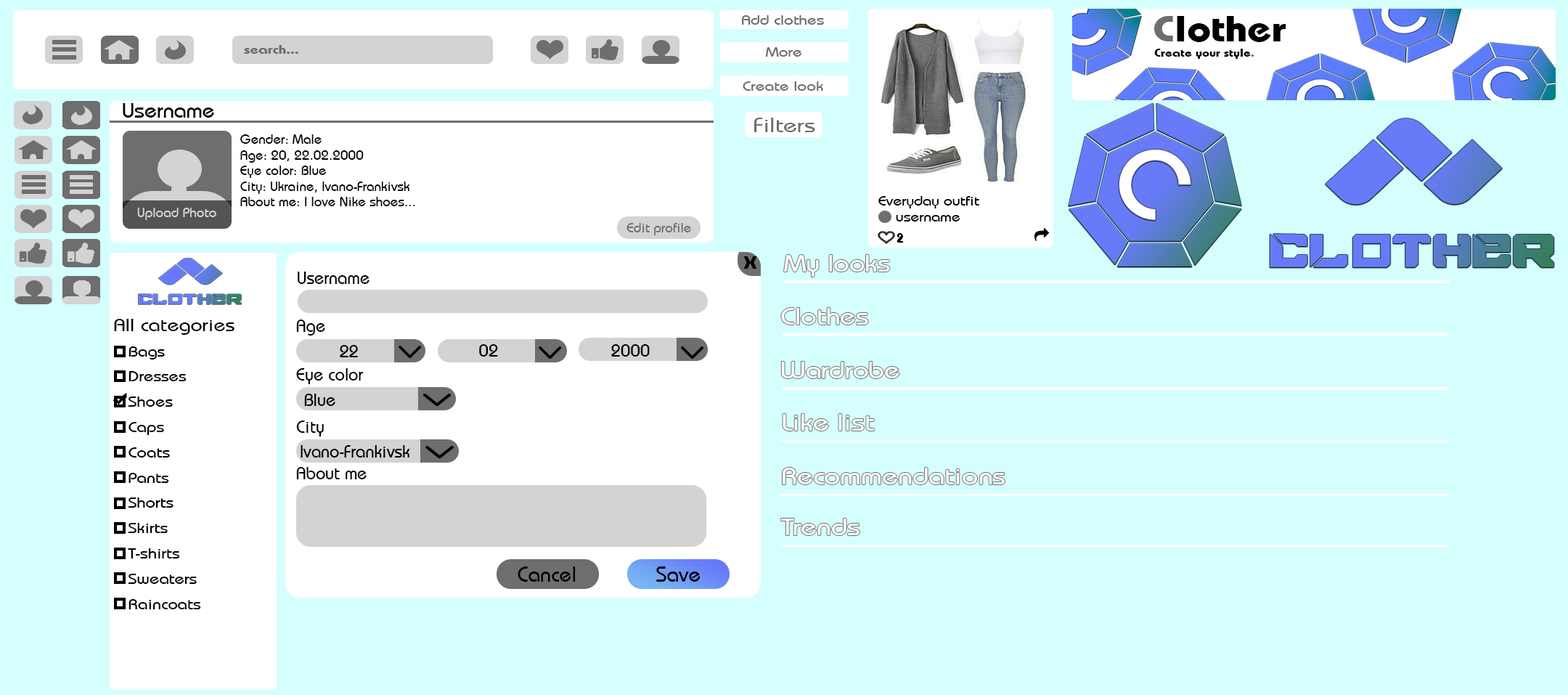
<style>
.page{position:relative;width:1568px;height:695px;background:#d5fffd}
.page>*{position:absolute;margin:0}
.t1{font:13.9px "BauhausLT-Medium";color:#6e6e6e;scale:1.2 1}
.t2{font:36.3px "BauhausLT-Bold";color:#000000;scale:1.2 1}
.t3{font:36.3px "BauhausLT-Bold";color:#6e6e6e;scale:1.2 1}
.t4{font:12.2px "BauhausLT-Bold";color:#6e6e6e;scale:1.24 1}
.t5{font:10.9px "BauhausLT-Bold";color:#000000;scale:1.2 1}
.t6{font:10.9px "BauhausLT-Bold";color:#6e6e6e;scale:1.2 1}
.t7{font:20.9px "BauhausLT-Medium";color:#000000;scale:1.06 1}
.t8{font:20.6px "BauhausLT-Medium";color:#6e6e6e;scale:1.2 1}
.t9{font:13.1px "BauhausLT-Medium";color:#000000;scale:1.06 1}
.t10{font:13.1px "BauhausLT-Medium";color:#000000;scale:1.2 1}
.t11{font:13.1px "BauhausLT-Medium";color:#d3d3d4;scale:1.06 1}
.t12{font:13.1px "BauhausLT-Bold";color:#000000;scale:1.2 1}
.t13{font:13.1px "BauhausLT-Medium";color:#6e6e6e;scale:1.06 1}
.t14{font:13.1px "BauhausLT-Bold";color:#000000}
.t15{font:17.4px "BIGMACCA";color:#000000}
.t16{font:24.1px "BauhausLT-Medium";color:#ffffff;scale:1.16 1}
.t17{font:17.4px "BauhausLT-Medium";color:#000000}
.t18{font:24px "BauhausLT-Medium";color:#ffffff;scale:1.17 1}
.t19{font:14.5px "BauhausLT-Medium";color:#000000;scale:1.2 1}
.t20{font:17.4px "BauhausLT-Medium";color:#000000;scale:1.2 1}
.t21{font:24.3px "BauhausLT-Medium";color:#ffffff;scale:1.19 1}
.t22{font:24.2px "BauhausLT-Medium";color:#ffffff;scale:1.19 1}
.t23{font:21.8px "BauhausLT-Medium";color:#000000}
</style>
<div class="page">
<p class="t1" style="left:742px;top:15px;width:82px;height:10px">Add clothes</p>
<p class="t2" style="left:1154px;top:16px;width:132px;height:26px"><span class="t3">C</span>lother</p>
<p class="t4" style="left:244px;top:45px;width:54px;height:9px">search...</p>
<p class="t1" style="left:765px;top:47px;width:37px;height:10px">More</p>
<p class="t5" style="left:1154px;top:49px;width:100px;height:10px">Create your style<span class="t6">.</span></p>
<p class="t1" style="left:743px;top:81px;width:80px;height:10px">Create look</p>
<p class="t7" style="left:123px;top:103px;width:91px;height:15px">Username</p>
<p class="t8" style="left:754px;top:118px;width:61px;height:14px">Filters</p>
<p class="t9" style="left:240px;top:134px;width:175px;height:72px">Gender: Male<br>Age: 20, 22.02.2000<br>Eye color: Blue<br>City: Ukraine, Ivano-Frankivsk<br>About me: I love Nike shoes...</p>
<p class="t10" style="left:878px;top:196px;width:101px;height:12px">Everyday outfit</p>
<p class="t11" style="left:137px;top:208px;width:79px;height:12px">Upload Photo</p>
<p class="t10" style="left:896px;top:215px;width:64px;height:6px"><span class="t12">    </span>username</p>
<p class="t13" style="left:626px;top:223px;width:65px;height:12px">Edit profile</p>
<p class="t14" style="left:897px;top:233px;width:7px;height:9px">2</p>
<p class="t15" style="left:743px;top:256px;width:14px;height:13px">X</p>
<p class="t16" style="left:784px;top:255px;width:106px;height:22px">My looks</p>
<p class="t17" style="left:298px;top:271px;width:71px;height:13px">Username</p>
<p class="t18" style="left:781px;top:308px;width:87px;height:16px">Clothes</p>
<p class="t19" style="left:114px;top:319px;width:120px;height:290px"><span class="t20">All categories<br><br></span>   Bags<br><br>   Dresses<br><br>   Shoes<br><br>   Caps<br><br>   Coats<br><br>   Pants<br><br>   Shorts<br><br>   Skirts<br><br>   T-shirts<br><br>   Sweaters<br><br>   Raincoats</p>
<p class="t17" style="left:296px;top:319px;width:29px;height:16px">Age</p>
<p class="t17" style="left:340px;top:345px;width:18px;height:12px">22</p>
<p class="t17" style="left:479px;top:344px;width:19px;height:12px">02</p>
<p class="t17" style="left:611px;top:344px;width:39px;height:12px">2000</p>
<p class="t18" style="left:781px;top:362px;width:118px;height:16px">Wardrobe</p>
<p class="t17" style="left:296px;top:368px;width:68px;height:16px">Eye color</p>
<p class="t17" style="left:304px;top:393px;width:31px;height:13px">Blue</p>
<p class="t21" style="left:783px;top:414px;width:91px;height:16px">Like list</p>
<p class="t17" style="left:296px;top:420px;width:28px;height:16px">City</p>
<p class="t17" style="left:301px;top:445px;width:109px;height:12px">Ivano-Frankivsk</p>
<p class="t17" style="left:296px;top:467px;width:71px;height:12px">About me</p>
<p class="t22" style="left:783px;top:467px;width:222px;height:17px">Recommendations</p>
<p class="t21" style="left:781px;top:518px;width:78px;height:17px">Trends</p>
<p class="t23" style="left:518px;top:566px;width:58px;height:15px">Cancel</p>
<p class="t23" style="left:656px;top:566px;width:45px;height:15px">Save</p>
</div>
